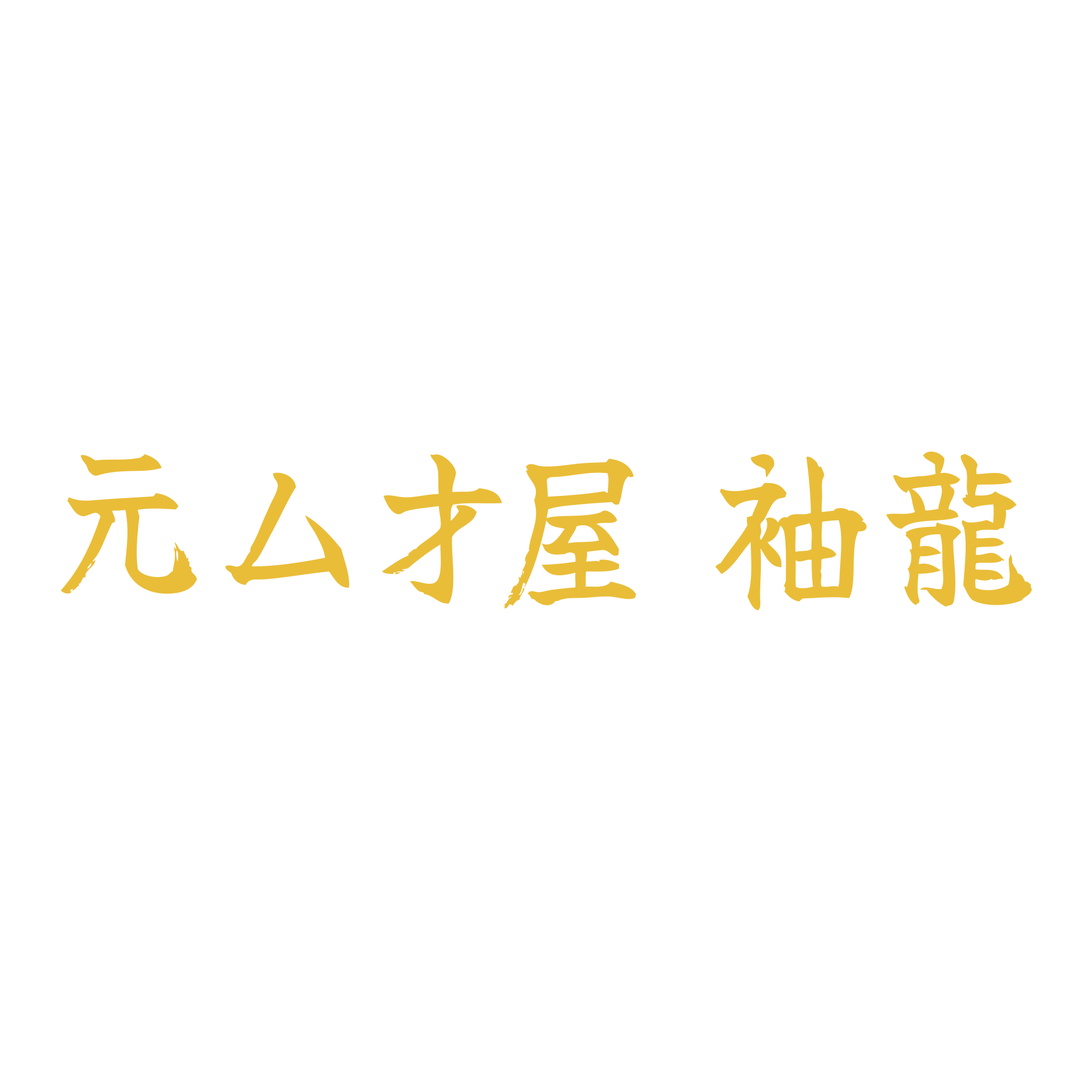
<style>
.page{position:relative;width:1092px;height:1092px;background:#ffffff}
.page>*{position:absolute;margin:0}
.t1{font:178.5px "YujiSyukuStd-R";letter-spacing:-0.01em;color:#e9bd38;scale:0.85 1}
</style>
<div class="page">
<p class="t1" style="left:61px;top:454px;width:136px;height:140px">元</p>
<p class="t1" style="left:382px;top:454px;width:120px;height:150px">才</p>
<p class="t1" style="left:503px;top:459px;width:133px;height:150px">屋</p>
<p class="t1" style="left:715px;top:454px;width:152px;height:157px">袖</p>
<p class="t1" style="left:886px;top:451px;width:146px;height:156px">龍</p>
<p class="t1" style="left:225px;top:472px;width:124px;height:116px">厶</p>
</div>
